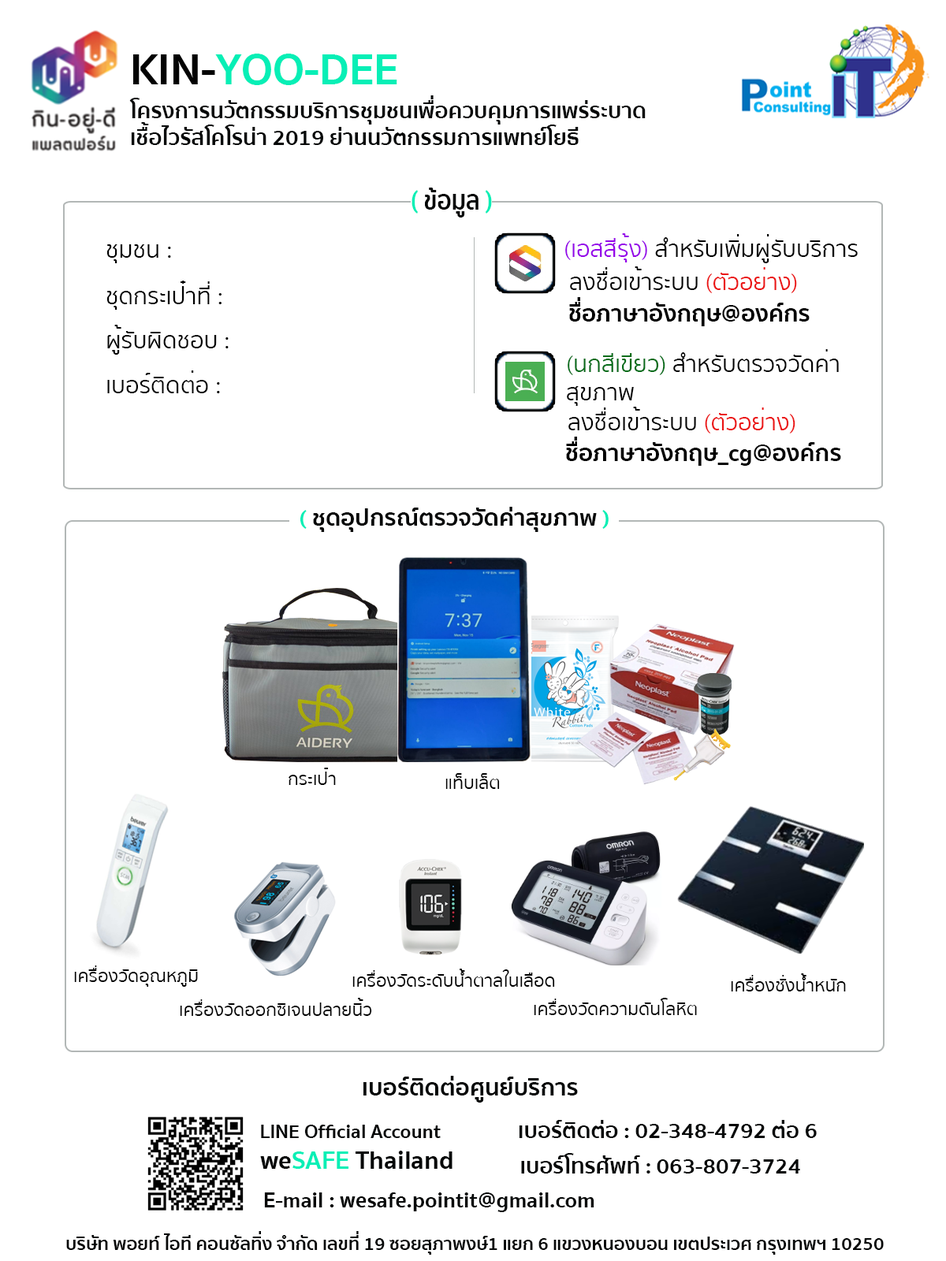
<style>
.page{position:relative;width:946px;height:1261px;background:#ffffff}
.page>*{position:absolute;margin:0}
.t1{font:44.9px "SukhumvitSet-Bold";color:#07efb6}
.t2{font:44.9px "SukhumvitSet-Bold";color:#030303}
.t3{font:22px "SukhumvitSet-Bold";color:#050707}
.t4{font:27.6px "SukhumvitSet-Bold";color:#050707;scale:0.86 1}
.t5{font:27.6px "SukhumvitSet-Bold";color:#07efb6;scale:0.86 1}
.t6{font:23.6px "SukhumvitSet-Text";color:#000000}
.t7{font:23.6px "SukhumvitSet-Text";color:#9605e9}
.t8{font:23.6px "SukhumvitSet-Text";color:#eb1515}
.t9{font:23.6px "SukhumvitSet-Bold";color:#000000}
.t10{font:23.6px "SukhumvitSet-Text";color:#066d1a}
.t11{font:22.7px "SukhumvitSet-Bold";color:#050707;scale:1.04 1}
.t12{font:22.7px "SukhumvitSet-Bold";color:#07efb6;scale:1.04 1}
.t13{font:18.1px "SukhumvitSet-Text";color:#000000}
.t14{font:23.6px "SukhumvitSet-Bold";color:#050707}
.t15{font:19.7px "SukhumvitSet-Bold";color:#050707}
.t16{font:26px "SukhumvitSet-Bold";color:#050707}
.t17{font:26px "SukhumvitSet-Bold";color:#07efb6}
.t18{font:18.1px "SukhumvitSet-Bold";color:#050707}
</style>
<div class="page">
<p class="t1" style="left:133px;top:54px;width:264px;height:31px"><span class="t2">KIN-</span>YOO-DEE</p>
<p class="t3" style="left:129px;top:95px;width:516px;height:50px">โครงการนวัตกรรมบริการชุมชนเพื่อควบคุมการแพร่ระบาด<br>เชื้อไวรัสโคโรน่า 2019 ย่านนวัตกรรมการแพทย์โยธี</p>
<p class="t4" style="left:411px;top:188px;width:81px;height:30px"><span class="t5">( </span>ข้อมูล <span class="t5">)</span></p>
<p class="t6" style="left:565px;top:233px;width:292px;height:30px"><span class="t7">(เอสสีรุ้ง) </span>สำหรับเพิ่มผู่รับบริการ</p>
<p class="t6" style="left:107px;top:244px;width:64px;height:19px">ชุมชน :</p>
<p class="t6" style="left:570px;top:266px;width:227px;height:27px">ลงชื่อเข้าระบบ <span class="t8">(ตัวอย่าง)</span></p>
<p class="t6" style="left:107px;top:281px;width:114px;height:29px">ชุดกระเป๋าที่ :</p>
<p class="t9" style="left:569px;top:297px;width:240px;height:29px">ชื่อภาษาอังกฤษ@องค์กร</p>
<p class="t6" style="left:107px;top:325px;width:122px;height:30px">ผู้รับผิดชอบ :</p>
<p class="t6" style="left:567px;top:349px;width:272px;height:57px"><span class="t10">(นกสีเขียว) </span>สำหรับตรวจวัดค่า<br>สุขภาพ</p>
<p class="t6" style="left:107px;top:370px;width:113px;height:23px">เบอร์ติดต่อ :</p>
<p class="t6" style="left:568px;top:407px;width:227px;height:26px">ลงชื่อเข้าระบบ <span class="t8">(ตัวอย่าง)</span></p>
<p class="t9" style="left:566px;top:437px;width:275px;height:29px">ชื่อภาษาอังกฤษ_cg@องค์กร</p>
<p class="t11" style="left:300px;top:507px;width:308px;height:25px"><span class="t12">( </span>ชุดอุปกรณ์ตรวจวัดค่าสุขภาพ <span class="t12">)</span></p>
<p class="t13" style="left:288px;top:768px;width:48px;height:17px">กระเป๋า</p>
<p class="t13" style="left:445px;top:773px;width:55px;height:16px">แท็บเล็ต</p>
<p class="t13" style="left:74px;top:965px;width:124px;height:22px">เครื่องวัดอุณหภูมิ</p>
<p class="t13" style="left:352px;top:969px;width:203px;height:18px">เครื่องวัดระดับน้ำตาลในเลือด</p>
<p class="t13" style="left:731px;top:973px;width:115px;height:18px">เครื่องชั่งน้ำหนัก</p>
<p class="t13" style="left:180px;top:998px;width:192px;height:18px">เครื่องวัดออกซิเจนปลายนิ้ว</p>
<p class="t13" style="left:534px;top:998px;width:163px;height:17px">เครื่องวัดความดันโลหิต</p>
<p class="t14" style="left:363px;top:1076px;width:215px;height:27px">เบอร์ติดต่อศูนย์บริการ</p>
<p class="t3" style="left:519px;top:1120px;width:297px;height:18px">เบอร์ติดต่อ : 02-348-4792 ต่อ 6</p>
<p class="t15" style="left:261px;top:1125px;width:180px;height:13px">LINE Official Account</p>
<p class="t16" style="left:260px;top:1151px;width:192px;height:18px">we<span class="t17">SAFE</span> Thailand</p>
<p class="t3" style="left:521px;top:1153px;width:279px;height:20px">เบอร์โทรศัพท์ : 063-807-3724</p>
<p class="t3" style="left:264px;top:1192px;width:330px;height:20px">E-mail : wesafe.pointit@gmail.com</p>
<p class="t18" style="left:66px;top:1231px;width:817px;height:24px">บริษัท พอยท์ ไอที คอนซัลทิ่ง จำกัด เลขที่ 19 ซอยสุภาพงษ์1 แยก 6 แขวงหนองบอน เขตประเวศ กรุงเทพฯ 10250</p>
</div>
